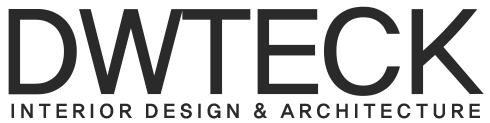
<style>
.page{position:relative;width:490px;height:123px;background:#ffffff}
.page>*{position:absolute;margin:0}
.t1{font:20px "HaanYGodic25";letter-spacing:0.08em;color:#2b2a2a}
.t2{font:125px "HaanYGodic23";letter-spacing:-0.1em;color:#2b2a2a}
</style>
<div class="page">
<p class="t1" style="left:8px;top:6px;width:476px;height:113px"><span class="t2">DWTECK<br>  </span>INTERIOR DESIGN &amp; ARCHITECTURE</p>
</div>
